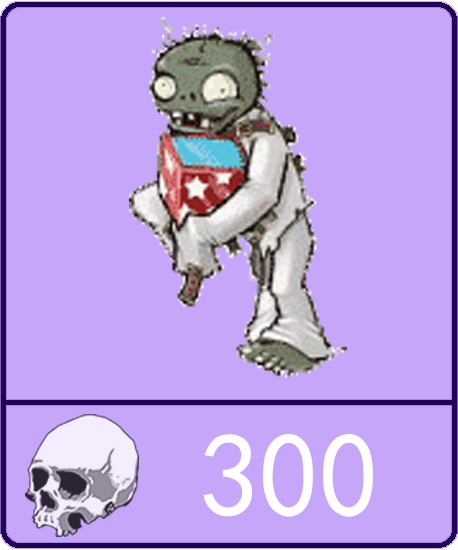
<style>
.page{position:relative;width:458px;height:550px;background:#c6a6f9}
.page>*{position:absolute;margin:0}
.t1{font:120px "SimHei";color:#fefefc}
</style>
<div class="page">
<p class="t1" style="left:203px;top:434px;width:170px;height:83px">300</p>
</div>
